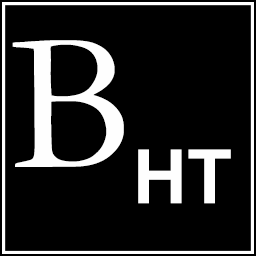
<style>
.page{position:relative;width:256px;height:256px;background:#000000}
.page>*{position:absolute;margin:0}
.t1{font:200px "Garamond";color:#fefefe}
.t2{font:75px "Arial-BoldMT";color:#fefefe}
</style>
<div class="page">
<p class="t1" style="left:12px;top:40px;width:112px;height:127px">B</p>
<p class="t2" style="left:138px;top:149px;width:93px;height:55px">HT</p>
</div>
